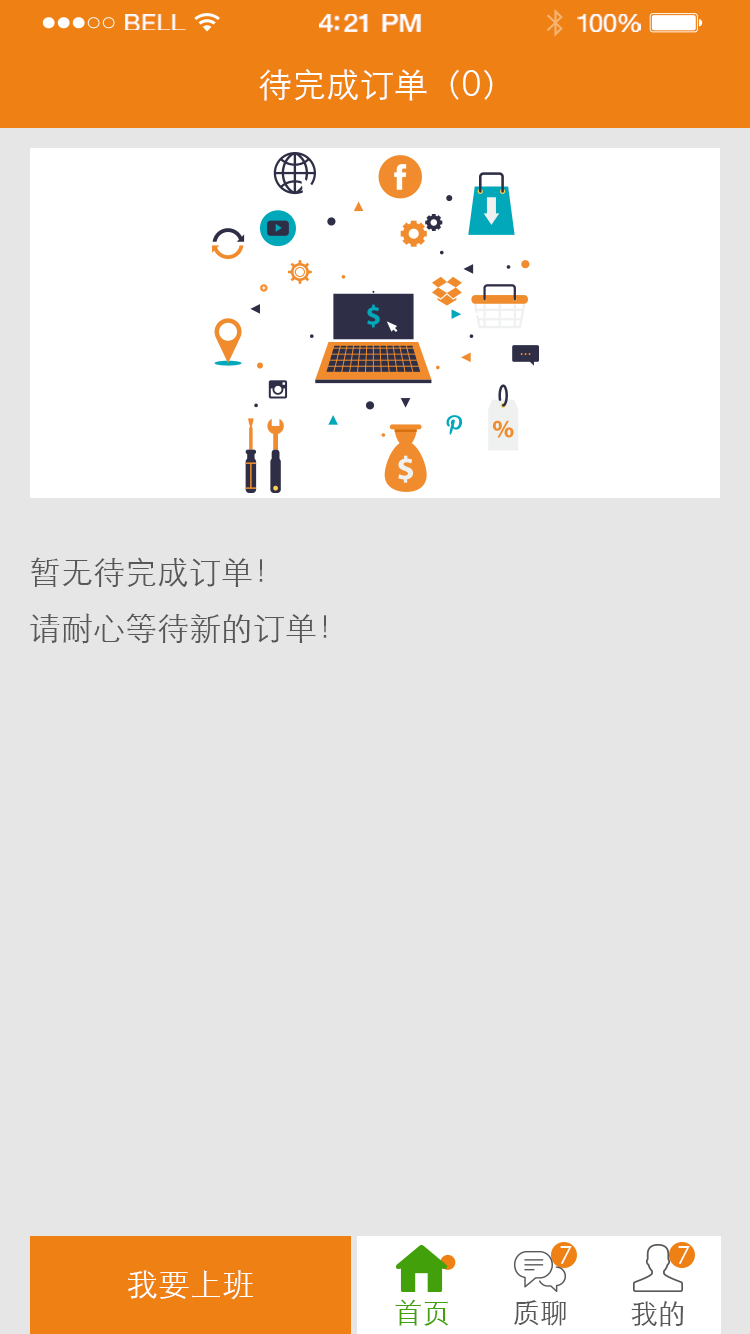
<style>
.page{position:relative;width:750px;height:1334px;background:#e6e6e6}
.page>*{position:absolute;margin:0}
.t1{font:23.3px "HelveticaNeue";letter-spacing:0.02em;color:#ffffff;scale:1.06 1}
.t2{font:25.3px "HelveticaNeue-Medium";letter-spacing:-0.02em;color:#ffffff;scale:1.06 1}
.t3{font:24.3px "HelveticaNeue";letter-spacing:-0.02em;color:#ffffff;scale:1.06 1}
.t4{font:34px "STXihei";color:#ffffff}
.t5{font:32px/56px "STXihei";color:#595757}
.t6{font:24px "STXihei";color:#ffffff}
.t7{font:32px "STXihei";color:#ffffff}
.t8{font:28px "STXihei";color:#42a00a}
.t9{font:28px "STXihei";color:#595757}
</style>
<div class="page">
<p class="t1" style="left:125px;top:14px;width:61px;height:16px">BELL</p>
<p class="t2" style="left:319px;top:14px;width:102px;height:18px">4:21 PM</p>
<p class="t3" style="left:577px;top:14px;width:64px;height:18px">100%</p>
<p class="t4" style="left:259px;top:69px;width:234px;height:32px">待完成订单（0）</p>
<p class="t5" style="left:30px;top:557px;width:297px;height:87px">暂无待完成订单！<br>请耐心等待新的订单！</p>
<p class="t6" style="left:560px;top:1246px;width:12px;height:18px">7</p>
<p class="t6" style="left:678px;top:1246px;width:12px;height:18px">7</p>
<p class="t7" style="left:128px;top:1270px;width:125px;height:30px">我要上班</p>
<p class="t8" style="left:395px;top:1299px;width:53px;height:27px">首页</p>
<p class="t9" style="left:514px;top:1300px;width:52px;height:26px">质聊</p>
<p class="t9" style="left:631px;top:1301px;width:53px;height:26px">我的</p>
</div>
